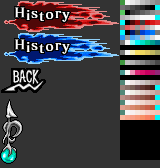
<style>
.page{position:relative;width:160px;height:168px;background:#333333}
.page>*{position:absolute;margin:0}
.t1{font:13px/32px "MatisseVPro-DB";letter-spacing:0.1em;color:#ffffff}
</style>
<div class="page">
<p class="t1" style="left:14px;top:7px;width:56px;height:47px">History<br>History</p>
</div>
